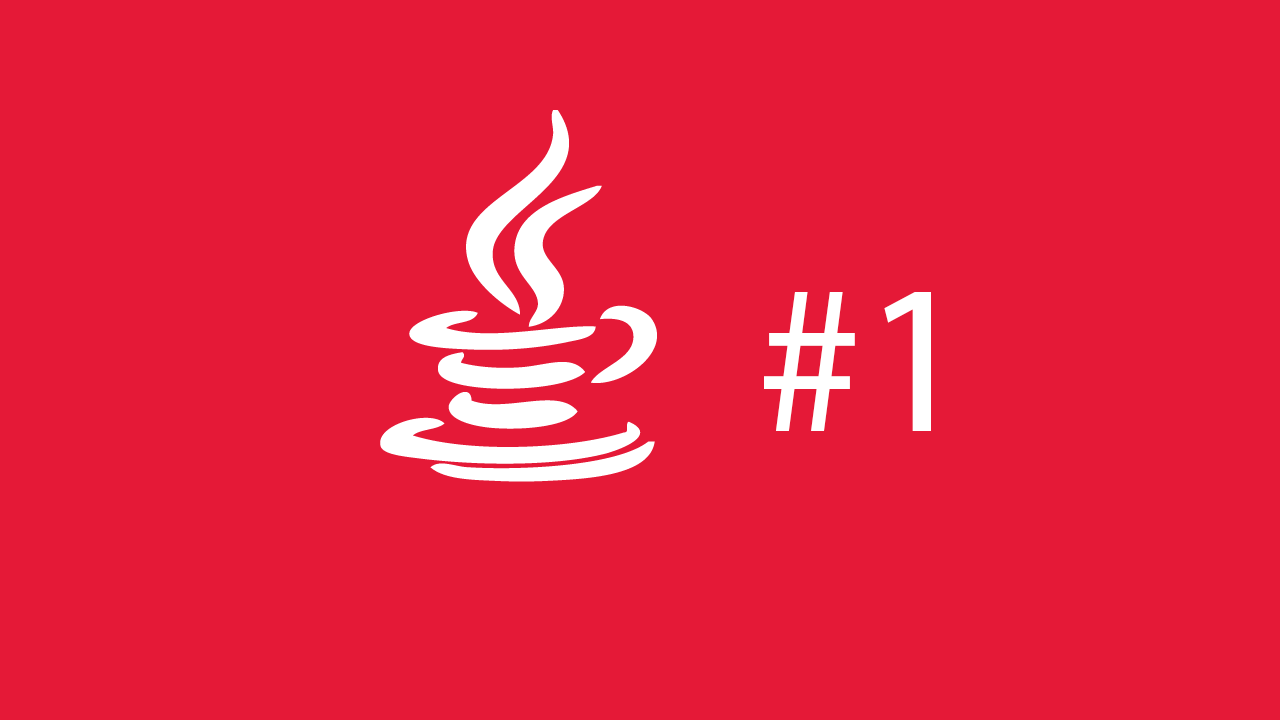
<style>
.page{position:relative;width:1280px;height:720px;background:#e51937}
.page>*{position:absolute;margin:0}
.t1{font:214px "MyriadPro-Regular";color:#ffffff}
</style>
<div class="page">
<p class="t1" style="left:764px;top:292px;width:167px;height:139px">#1</p>
</div>
